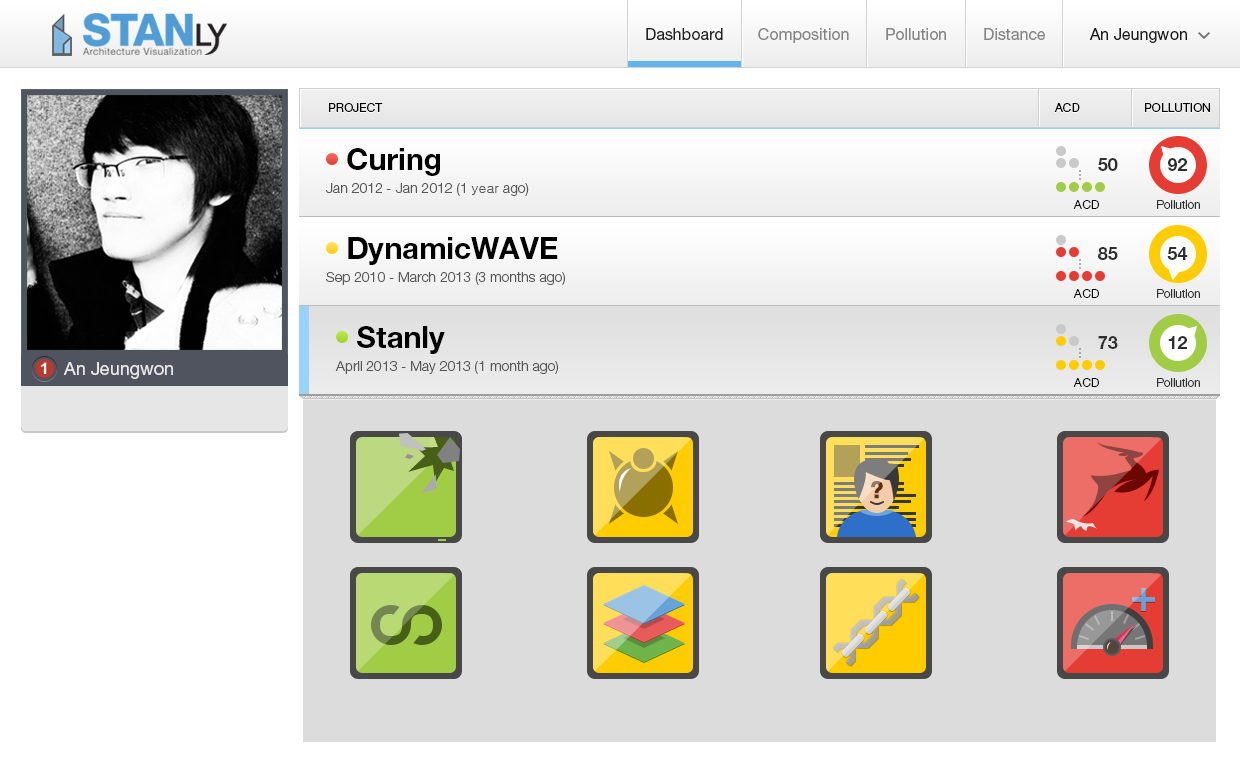
<style>
.page{position:relative;width:1240px;height:768px;background:#dcdcdc}
.page>*{position:absolute;margin:0}
.t1{font:16px "HelveticaNeueLTPro-Roman";color:#212121}
.t2{font:16px "HelveticaNeueLTPro-Roman";color:#848484}
.t3{font:16px "HelveticaNeueLTPro-Roman";color:#1a1a1a}
.t4{font:12px "HelveticaNeueLTPro-Roman";color:#000000}
.t5{font:30px "HelveticaNeueLTPro-Bd";color:#000000}
.t6{font:18px "HelveticaNeueLTPro-Bd";color:#2e2e2e}
.t7{font:14px "HelveticaNeueLTPro-Lt";color:#575757}
.t8{font:14px "Gulim";color:#575757}
.t9{font:12px "HelveticaNeueLTPro-Lt";color:#000000}
.t10{font:12px "HelveticaNeueLTPro-Lt";color:#2e2e2e}
.t11{font:17px "Arial-BoldMT";color:#ffffff}
.t12{font:18px "HelveticaNeueLTPro-Roman";color:#e8e8e8}
.t13{font:23px "HelveticaNeueLTPro-Bd";font-weight:bold}
</style>
<div class="page">
<p class="t1" style="left:646px;top:28px;width:77px;height:12px">Dashboard</p>
<p class="t2" style="left:758px;top:28px;width:91px;height:15px">Composition</p>
<p class="t2" style="left:886px;top:28px;width:60px;height:12px">Pollution</p>
<p class="t2" style="left:984px;top:28px;width:61px;height:12px">Distance</p>
<p class="t3" style="left:1089px;top:28px;width:98px;height:15px">An Jeungwon</p>
<p class="t4" style="left:329px;top:103px;width:54px;height:9px">PROJECT</p>
<p class="t4" style="left:1054px;top:103px;width:26px;height:9px">ACD</p>
<p class="t4" style="left:1145px;top:103px;width:65px;height:9px">POLLUTION</p>
<p class="t5" style="left:347px;top:148px;width:93px;height:28px">Curing</p>
<p class="t6" style="left:1098px;top:158px;width:20px;height:13px">50</p>
<p class="t6" style="left:1168px;top:158px;width:19px;height:13px">92</p>
<p class="t7" style="left:326px;top:183px;width:203px;height:13px">Jan 2012 - Jan 2012 (1 <span class="t8">year</span> ago)</p>
<p class="t9" style="left:1073px;top:200px;width:26px;height:9px">ACD</p>
<p class="t10" style="left:1157px;top:200px;width:43px;height:9px">Pollution</p>
<p class="t5" style="left:348px;top:237px;width:210px;height:28px">DynamicWAVE</p>
<p class="t6" style="left:1098px;top:247px;width:20px;height:13px">85</p>
<p class="t6" style="left:1167px;top:247px;width:21px;height:13px">54</p>
<p class="t7" style="left:326px;top:272px;width:239px;height:13px">Sep 2010 - March 2013 (3 months ago)</p>
<p class="t9" style="left:1073px;top:289px;width:26px;height:9px">ACD</p>
<p class="t10" style="left:1157px;top:289px;width:43px;height:9px">Pollution</p>
<p class="t5" style="left:357px;top:326px;width:88px;height:28px">Stanly</p>
<p class="t6" style="left:1098px;top:336px;width:20px;height:13px">73</p>
<p class="t6" style="left:1168px;top:336px;width:19px;height:13px">12</p>
<p class="t11" style="left:40px;top:362px;width:7px;height:12px">1</p>
<p class="t12" style="left:63px;top:362px;width:110px;height:17px">An Jeungwon</p>
<p class="t7" style="left:335px;top:361px;width:223px;height:13px">April 2013 - May 2013 (1 month ago)</p>
<p class="t9" style="left:1073px;top:378px;width:26px;height:9px">ACD</p>
<p class="t10" style="left:1157px;top:378px;width:43px;height:9px">Pollution</p>
<p class="t13" style="left:871px;top:481px;width:12px;height:18px">?</p>
</div>
